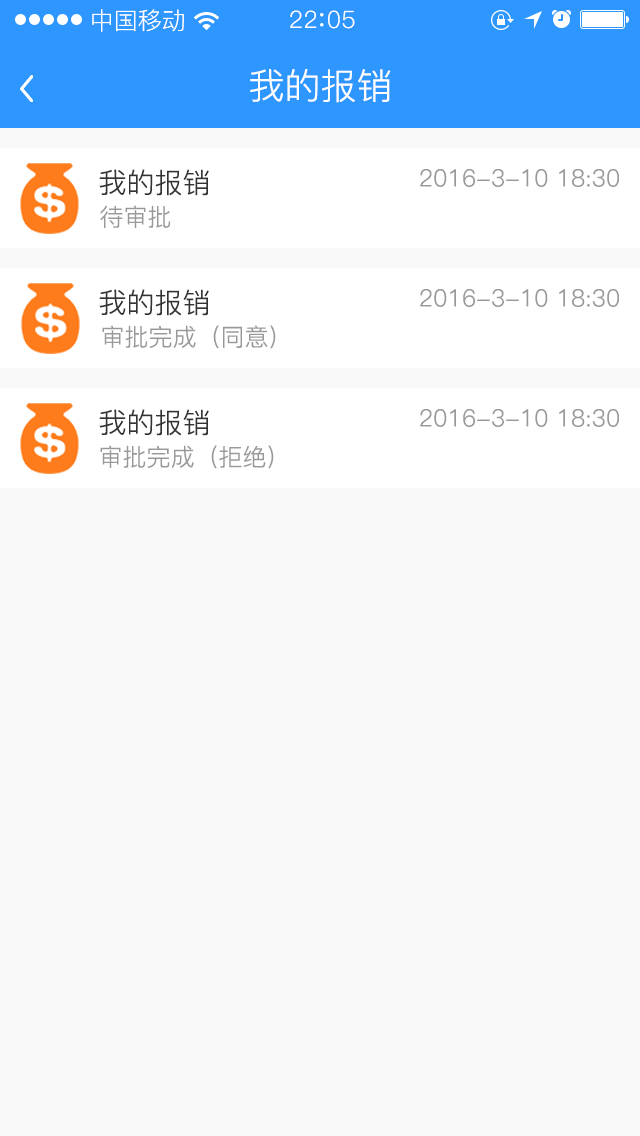
<style>
.page{position:relative;width:640px;height:1136px;background:#f9f9f9}
.page>*{position:absolute;margin:0}
.t1{font:24px "PingFang-SC-Regular";color:#ffffff}
.t2{font:24px "PingFang-SC-Regular";letter-spacing:0.03em;color:#ffffff}
.t3{font:36px "PingFang-SC-Regular";color:#ffffff}
.t4{font:28px "PingFang-SC-Regular";color:#333333}
.t5{font:24px "PingFang-SC-Regular";color:#999999}
</style>
<div class="page">
<p class="t1" style="left:92px;top:9px;width:92px;height:23px">中国移动</p>
<p class="t2" style="left:290px;top:10px;width:65px;height:19px">22 05</p>
<p class="t3" style="left:250px;top:69px;width:141px;height:34px">我的报销</p>
<p class="t4" style="left:99px;top:169px;width:110px;height:27px">我的报销</p>
<p class="t5" style="left:420px;top:169px;width:199px;height:18px">2016-3-10 18:30</p>
<p class="t5" style="left:100px;top:205px;width:71px;height:23px">待审批</p>
<p class="t4" style="left:99px;top:289px;width:110px;height:27px">我的报销</p>
<p class="t5" style="left:420px;top:289px;width:199px;height:18px">2016-3-10 18:30</p>
<p class="t5" style="left:102px;top:325px;width:174px;height:24px">审批完成（同意）</p>
<p class="t4" style="left:99px;top:409px;width:110px;height:27px">我的报销</p>
<p class="t5" style="left:420px;top:409px;width:199px;height:18px">2016-3-10 18:30</p>
<p class="t5" style="left:100px;top:445px;width:174px;height:24px">审批完成（拒绝）</p>
</div>
